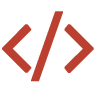
<style>
.page{position:relative;width:95px;height:95px;background:#ffffff}
.page>*{position:absolute;margin:0}
.t1{font:86.4px "Consolas";letter-spacing:-0.16em;color:#bb4030;font-weight:bold;scale:0.83 1}
</style>
<div class="page">
<p class="t1" style="left:2px;top:11px;width:92px;height:71px">&lt;/&gt;</p>
</div>
